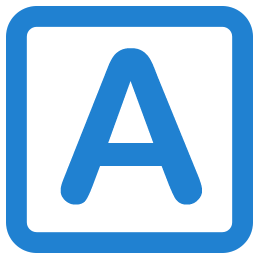
<style>
.page{position:relative;width:260px;height:260px;background:#ffffff}
.page>*{position:absolute;margin:0}
.t1{font:211.2px "ArialRoundedMTBold";color:#2081d1}
</style>
<div class="page">
<p class="t1" style="left:60px;top:48px;width:142px;height:157px">A</p>
</div>
